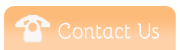
<style>
.page{position:relative;width:180px;height:50px;background:#fdbb7a}
.page>*{position:absolute;margin:0}
.t1{font:21.7px "Bellota-Regular";color:#fffbfb;scale:0.89 1}
</style>
<div class="page">
<p class="t1" style="left:58px;top:22px;width:101px;height:17px">Contact Us</p>
</div>
